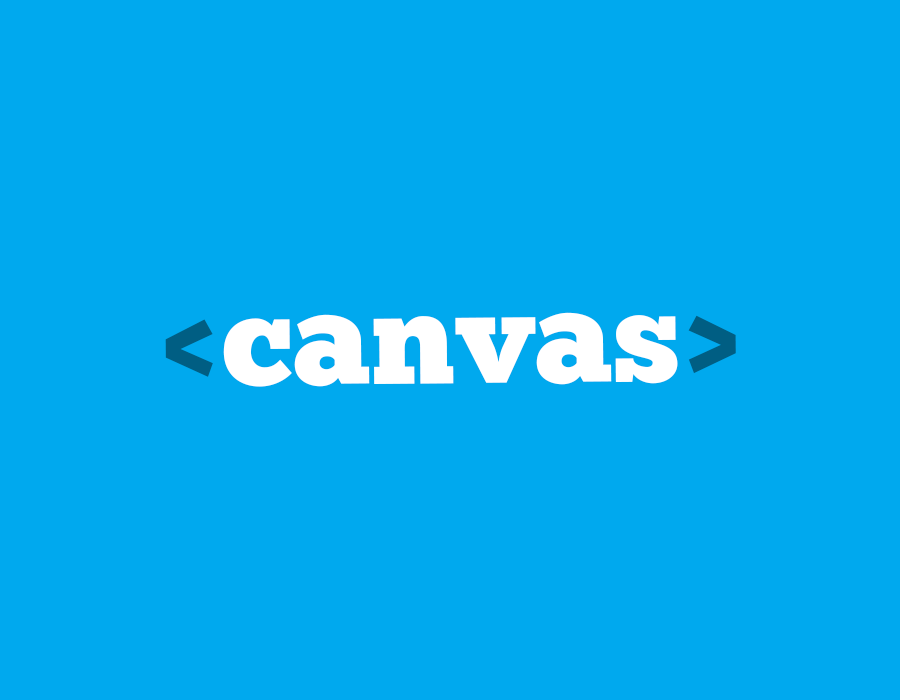
<style>
.page{position:relative;width:900px;height:700px;background:#00a9ee}
.page>*{position:absolute;margin:0}
.t1{font:130.1px "ChunkFive-Roman";color:#ffffff}
.t2{font:130.1px "ChunkFive-Roman";color:#005e83}
</style>
<div class="page">
<p class="t1" style="left:165px;top:312px;width:571px;height:75px"><span class="t2">&lt;</span>canvas<span class="t2">&gt;</span></p>
</div>
